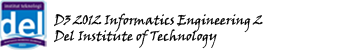
<style>
.page{position:relative;width:337px;height:50px;background:#ffffff}
.page>*{position:absolute;margin:0}
.t1{font:13.2px "VinerHandITC";color:#000000}
</style>
<div class="page">
<p class="t1" style="left:54px;top:13px;width:209px;height:36px">D3 2012 Informatics Engineering 2<br>Del Institute of Technology</p>
</div>
